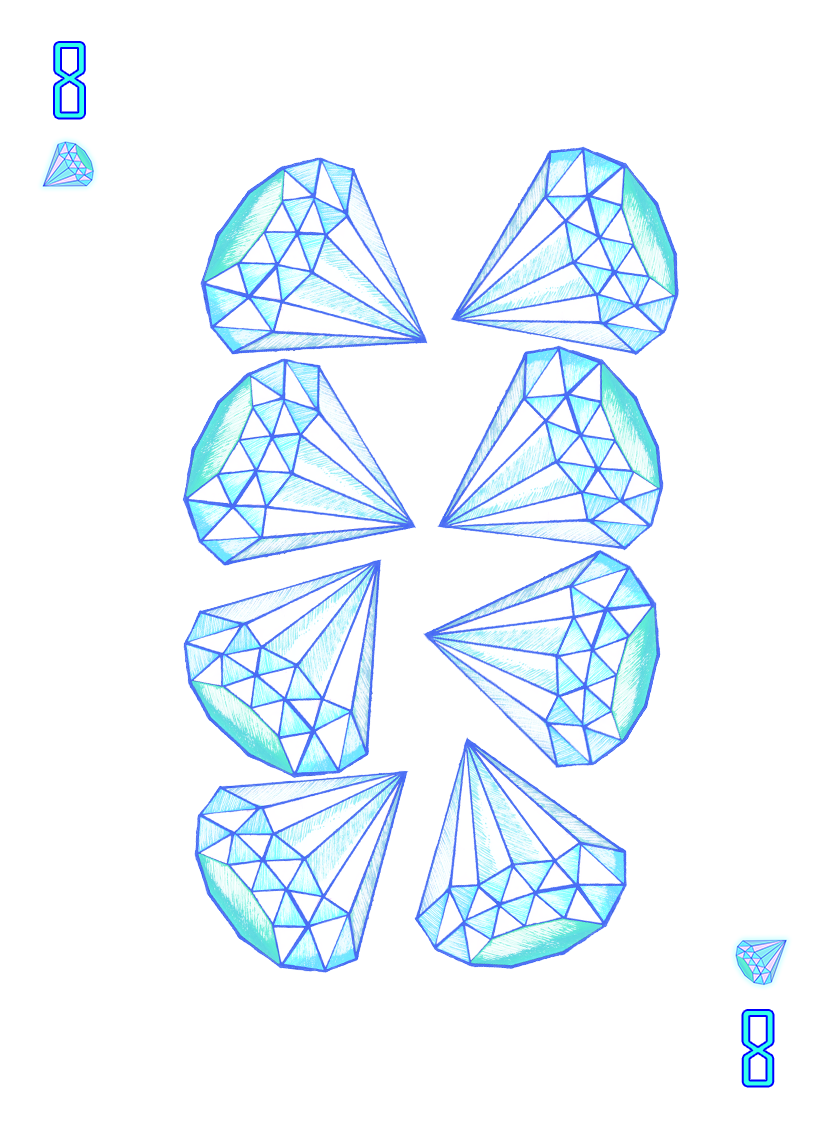
<style>
.page{position:relative;width:825px;height:1125px;background:#ffffff}
.page>*{position:absolute;margin:0}
.t1{font:100px "AgencyFB-Reg";color:#32ffeb}
</style>
<div class="page">
<p class="t1" style="left:54px;top:42px;width:31px;height:77px">8</p>
<p class="t1" style="left:742px;top:1010px;width:32px;height:77px;rotate:180deg">8</p>
</div>
